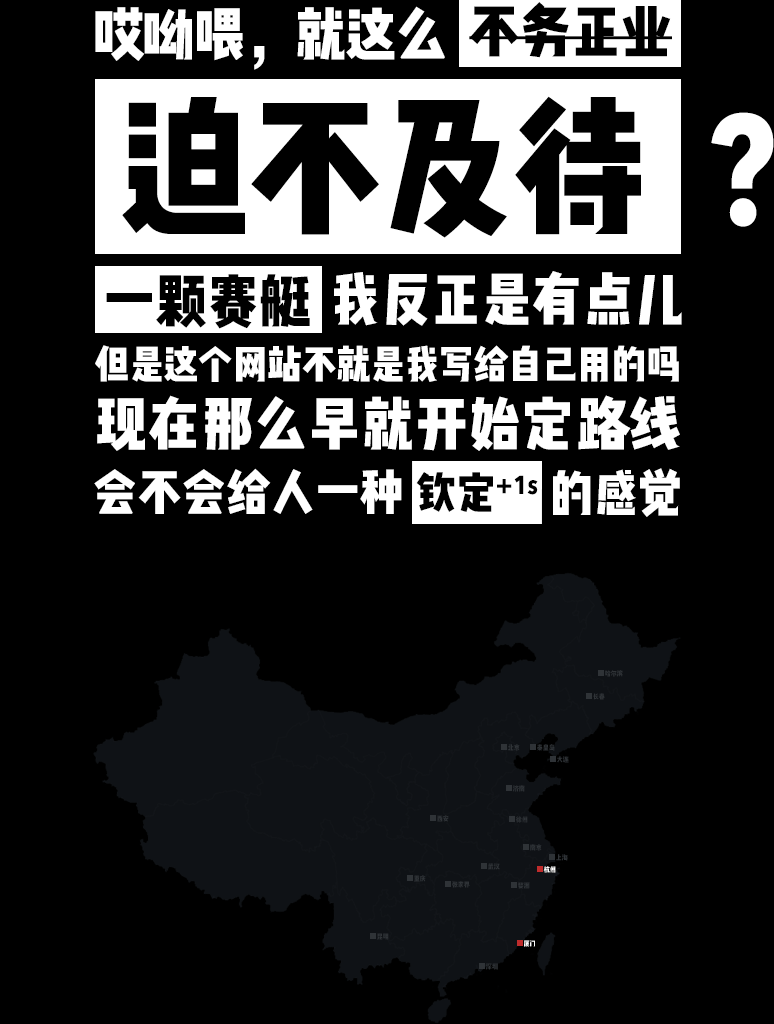
<style>
.page{position:relative;width:774px;height:1024px;background:#000000}
.page>*{position:absolute;margin:0}
.t1{font:58.8px "WenYue-XinQingNianTi-NC-W8";color:#ffffff}
.t2{font:58.8px "WenYue-XinQingNianTi-NC-W8";color:#000000}
.t3{font:154.3px "WenYue-XinQingNianTi-NC-W8";color:#000000}
.t4{font:154.3px "WenYue-XinQingNianTi-NC-W8";color:#ffffff}
.t5{font:58.8px "WenYue-XinQingNianTi-NC-W8";letter-spacing:0.02em;color:#000000}
.t6{font:40px "WenYue-XinQingNianTi-NC-W8";color:#ffffff}
.t7{font:59.5px "WenYue-XinQingNianTi-NC-W8";letter-spacing:0.02em;color:#ffffff}
.t8{font:50.5px "WenYue-XinQingNianTi-NC-W8";letter-spacing:0.02em;color:#ffffff}
.t9{font:44.5px "WenYue-XinQingNianTi-NC-W8";letter-spacing:0.02em;color:#000000}
.t10{font:6.8px "WenYue-XinQingNianTi-NC-W8";color:#2f3337;scale:1.03 1}
.t11{font:6.8px "WenYue-XinQingNianTi-NC-W8";color:#ffffff;scale:1.03 1}
</style>
<div class="page">
<p class="t1" style="left:95px;top:6px;width:350px;height:64px">哎呦喂，就这么</p>
<p class="t2" style="left:469px;top:2px;width:203px;height:56px">不务正业</p>
<p class="t3" style="left:122px;top:96px;width:652px;height:142px">迫不及待 <span class="t4"> ?</span></p>
<p class="t5" style="left:106px;top:274px;width:204px;height:55px">一颗赛艇</p>
<p class="t1" style="left:334px;top:271px;width:348px;height:55px">我反正是有点儿</p>
<p class="t6" style="left:95px;top:345px;width:584px;height:37px">但是这个网站不就是我写给自己用的吗</p>
<p class="t7" style="left:97px;top:395px;width:583px;height:56px">现在那么早就开始定路线</p>
<p class="t8" style="left:94px;top:468px;width:308px;height:46px">会不会给人一种</p>
<p class="t9" style="left:416px;top:472px;width:122px;height:40px">钦定+1s</p>
<p class="t8" style="left:553px;top:468px;width:127px;height:49px">的感觉</p>
<p class="t10" style="left:605px;top:670px;width:18px;height:7px">哈尔滨</p>
<p class="t10" style="left:593px;top:693px;width:12px;height:7px">长春</p>
<p class="t10" style="left:508px;top:744px;width:12px;height:7px">北京</p>
<p class="t10" style="left:537px;top:744px;width:18px;height:7px">秦皇岛</p>
<p class="t10" style="left:557px;top:756px;width:12px;height:7px">大连</p>
<p class="t10" style="left:513px;top:785px;width:12px;height:7px">济南</p>
<p class="t10" style="left:437px;top:815px;width:12px;height:7px">西安</p>
<p class="t10" style="left:515px;top:816px;width:13px;height:7px">徐州</p>
<p class="t10" style="left:530px;top:844px;width:12px;height:7px">南京</p>
<p class="t10" style="left:556px;top:854px;width:12px;height:7px">上海</p>
<p class="t10" style="left:488px;top:863px;width:12px;height:7px">武汉</p>
<p class="t11" style="left:543px;top:866px;width:13px;height:7px">杭州</p>
<p class="t10" style="left:414px;top:875px;width:12px;height:7px">重庆</p>
<p class="t10" style="left:452px;top:881px;width:18px;height:7px">张家界</p>
<p class="t10" style="left:518px;top:882px;width:12px;height:7px">婺源</p>
<p class="t10" style="left:377px;top:933px;width:12px;height:7px">昆明</p>
<p class="t11" style="left:524px;top:940px;width:11px;height:7px">厦门</p>
<p class="t10" style="left:486px;top:963px;width:12px;height:7px">深圳</p>
</div>
